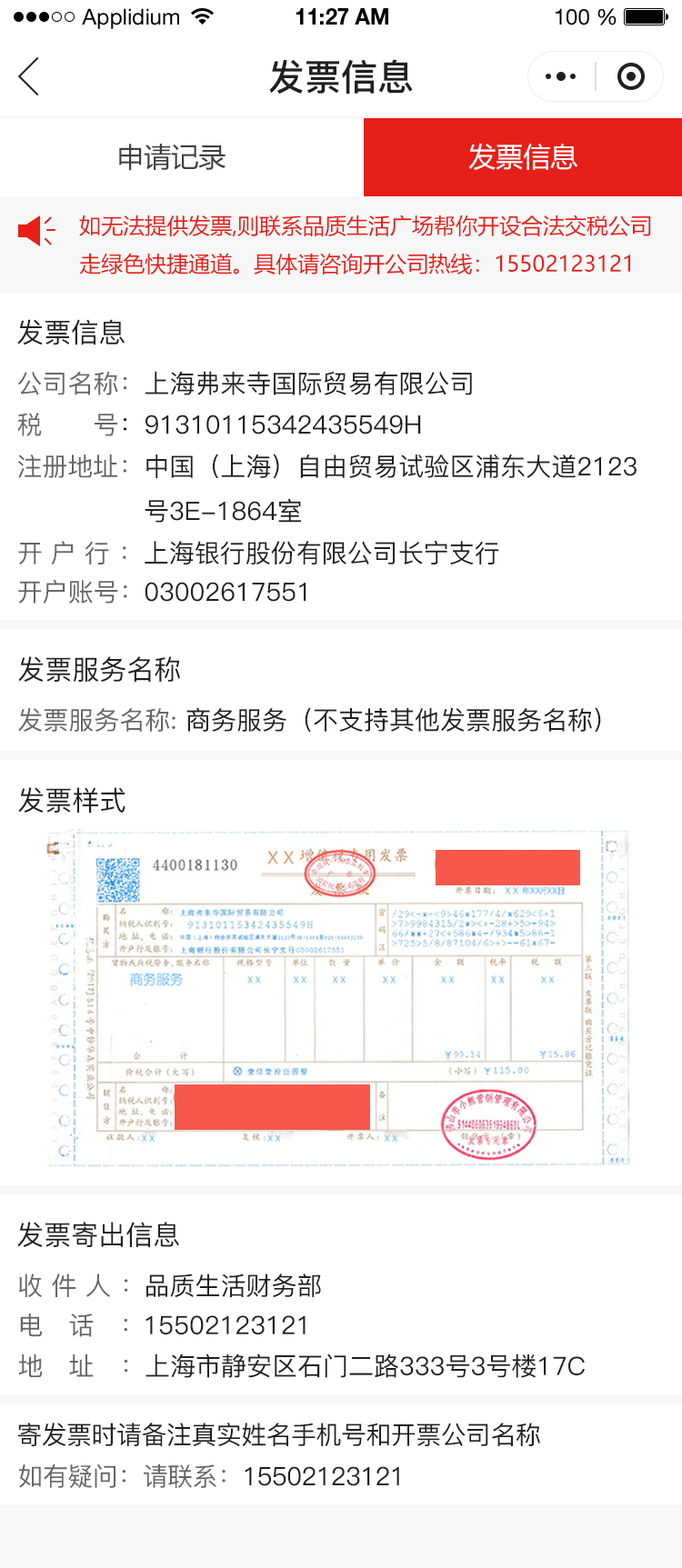
<style>
.page{position:relative;width:682px;height:1568px;background:#ffffff}
.page>*{position:absolute;margin:0}
.t1{font:21.8px "HelveticaNeueLTStd-Roman";color:#000000}
.t2{font:21.8px "HelveticaNeueLTStd-Bd";color:#000000}
.t3{font:36.4px "PingFang-SC-Bold";color:#202020;text-transform:uppercase}
.t4{font:27.3px "MicrosoftYaHei";color:#404040;text-transform:uppercase}
.t5{font:27.3px "MicrosoftYaHei";color:#ffffff;text-transform:uppercase}
.t6{font:21.8px "MicrosoftYaHei";color:#e61f18}
.t7{font:27.3px "PingFang-SC-Medium";color:#202020;text-transform:uppercase}
.t8{font:25.5px "PingFang-SC-Medium";color:#202020;text-transform:uppercase}
.t9{font:25.5px "PingFang-SC-Medium";color:#666666;text-transform:uppercase}
.t10{font:25.5px "PingFang-SC-Medium";letter-spacing:0.32em;color:#666666;text-transform:uppercase}
.t11{font:25.5px "PingFang-SC-Medium";letter-spacing:-0.02em;color:#666666;text-transform:uppercase}
.t12{font:25.5px "PingFang-SC-Medium";letter-spacing:0.34em;color:#666666;text-transform:uppercase}
.t13{font:25.5px "PingFang-SC-Medium";letter-spacing:-0.04em;color:#666666;text-transform:uppercase}
.t14{font:25.5px "PingFang-SC-Medium";letter-spacing:1em;color:#666666;text-transform:uppercase}
.t15{font:25.5px "PingFang-SC-Medium";letter-spacing:-0.06em;color:#666666;text-transform:uppercase}
.t16{font:25.5px "PingFang-SC-Medium";letter-spacing:-0.02em;color:#202020;text-transform:uppercase}
</style>
<div class="page">
<p class="t1" style="left:82px;top:8px;width:97px;height:21px">Applidium</p>
<p class="t2" style="left:295px;top:8px;width:93px;height:17px">11:27 AM</p>
<p class="t1" style="left:555px;top:8px;width:61px;height:17px">100 %</p>
<p class="t3" style="left:269px;top:59px;width:144px;height:35px">发票信息</p>
<p class="t4" style="left:119px;top:144px;width:106px;height:27px">申请记录</p>
<p class="t5" style="left:468px;top:143px;width:110px;height:27px">发票信息</p>
<p class="t6" style="left:79px;top:215px;width:572px;height:60px">如无法提供发票,则联系品质生活广场帮你开设合法交税公司<br>走绿色快捷通道。具体请咨询开公司热线：15502123121</p>
<p class="t7" style="left:17px;top:319px;width:108px;height:26px">发票信息</p>
<p class="t8" style="left:17px;top:371px;width:455px;height:24px"><span class="t9">公司名称：</span>上海弗来寺国际贸易有限公司</p>
<p class="t8" style="left:17px;top:413px;width:404px;height:23px"><span class="t9">税      号</span>：91310115342435549H</p>
<p class="t8" style="left:17px;top:454px;width:619px;height:69px"><span class="t9">注册地址：</span>中国（上海）自由贸易试验区浦东大道2123<br>               号3E-1864室</p>
<p class="t8" style="left:18px;top:541px;width:481px;height:24px"><span class="t10">开户行</span><span class="t9">：</span>上海银行股份有限公司长宁支行</p>
<p class="t8" style="left:18px;top:580px;width:288px;height:24px"><span class="t9">开户账号</span><span class="t11">：</span>03002617551</p>
<p class="t7" style="left:18px;top:656px;width:162px;height:26px">发票服务名称</p>
<p class="t8" style="left:18px;top:707px;width:583px;height:25px"><span class="t9">发票服务名称: </span>商务服务（不支持其他发票服务名称）</p>
<p class="t7" style="left:18px;top:787px;width:107px;height:27px">发票样式</p>
<p class="t7" style="left:17px;top:1222px;width:162px;height:25px">发票寄出信息</p>
<p class="t8" style="left:19px;top:1273px;width:302px;height:24px"><span class="t12">收件人</span><span class="t13">：</span>品质生活财务部</p>
<p class="t8" style="left:20px;top:1313px;width:285px;height:24px"><span class="t14">电话</span><span class="t15">：</span>15502123121</p>
<p class="t8" style="left:18px;top:1353px;width:566px;height:25px"><span class="t14">地址</span><span class="t11">：</span>上海市静安区石门二路333号3号楼17C</p>
<p class="t16" style="left:17px;top:1423px;width:523px;height:24px">寄发票时请备注真实姓名手机号和开票公司名称</p>
<p class="t16" style="left:19px;top:1464px;width:380px;height:24px"><span class="t11">如有疑问：请联系：</span>15502123121</p>
</div>
